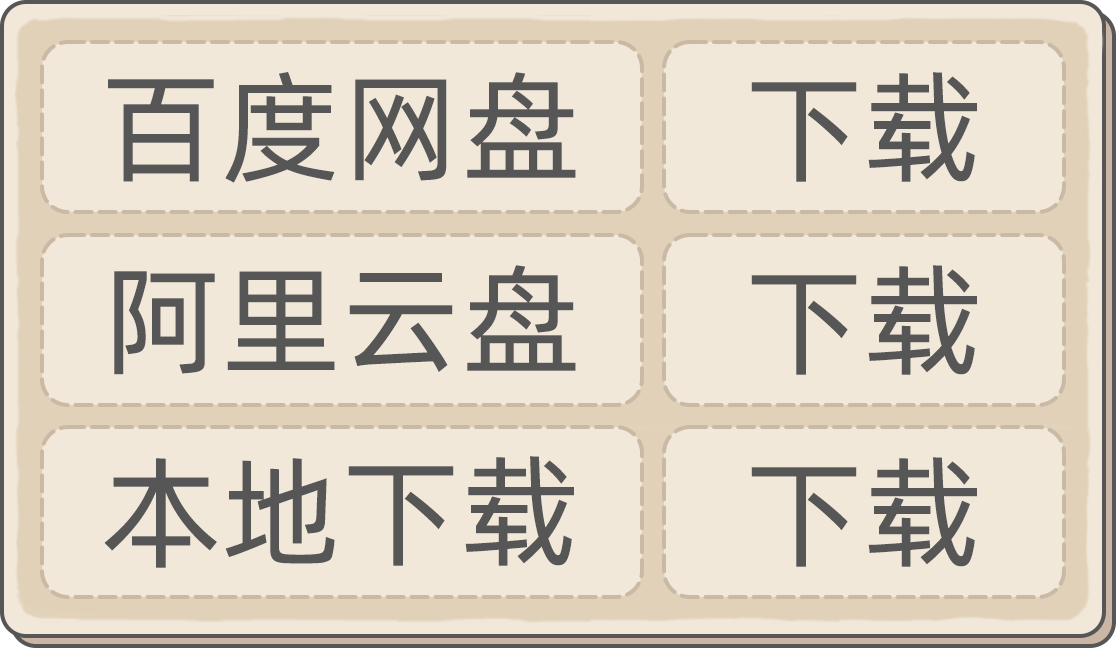
<style>
.page{position:relative;width:1116px;height:648px;background:#f1e8d9}
.page>*{position:absolute;margin:0}
.t1{font:120px "AlibabaPuHuiTi-Regular";letter-spacing:0.016em;color:#575656;text-transform:uppercase}
</style>
<div class="page">
<p class="t1" style="left:108px;top:72px;width:468px;height:111px">百度网盘</p>
<p class="t1" style="left:751px;top:72px;width:226px;height:110px">下载</p>
<p class="t1" style="left:114px;top:265px;width:462px;height:110px">阿里云盘</p>
<p class="t1" style="left:751px;top:265px;width:226px;height:110px">下载</p>
<p class="t1" style="left:104px;top:456px;width:470px;height:112px">本地下载</p>
<p class="t1" style="left:751px;top:457px;width:226px;height:110px">下载</p>
</div>
